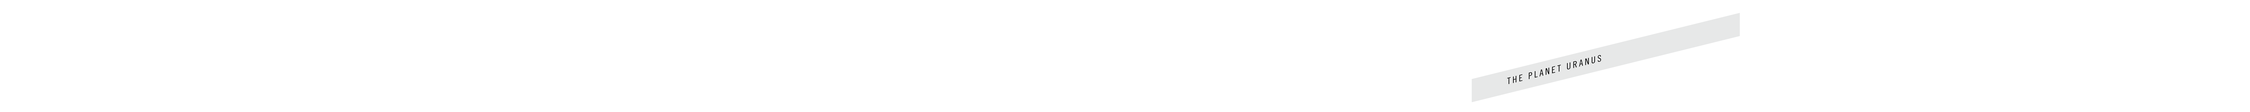
<style>
.page{position:relative;width:2250px;height:112px;background:#ffffff}
.page>*{position:absolute;margin:0}
.t1{font:9px "TradeGothicLTStd-Cn18";letter-spacing:0.2em;color:#000000;scale:1.03 1}
</style>
<div class="page">
<p class="t1" style="left:1507px;top:55px;width:94px;height:29px;rotate:-14deg">THE PLANET URANUS</p>
</div>
